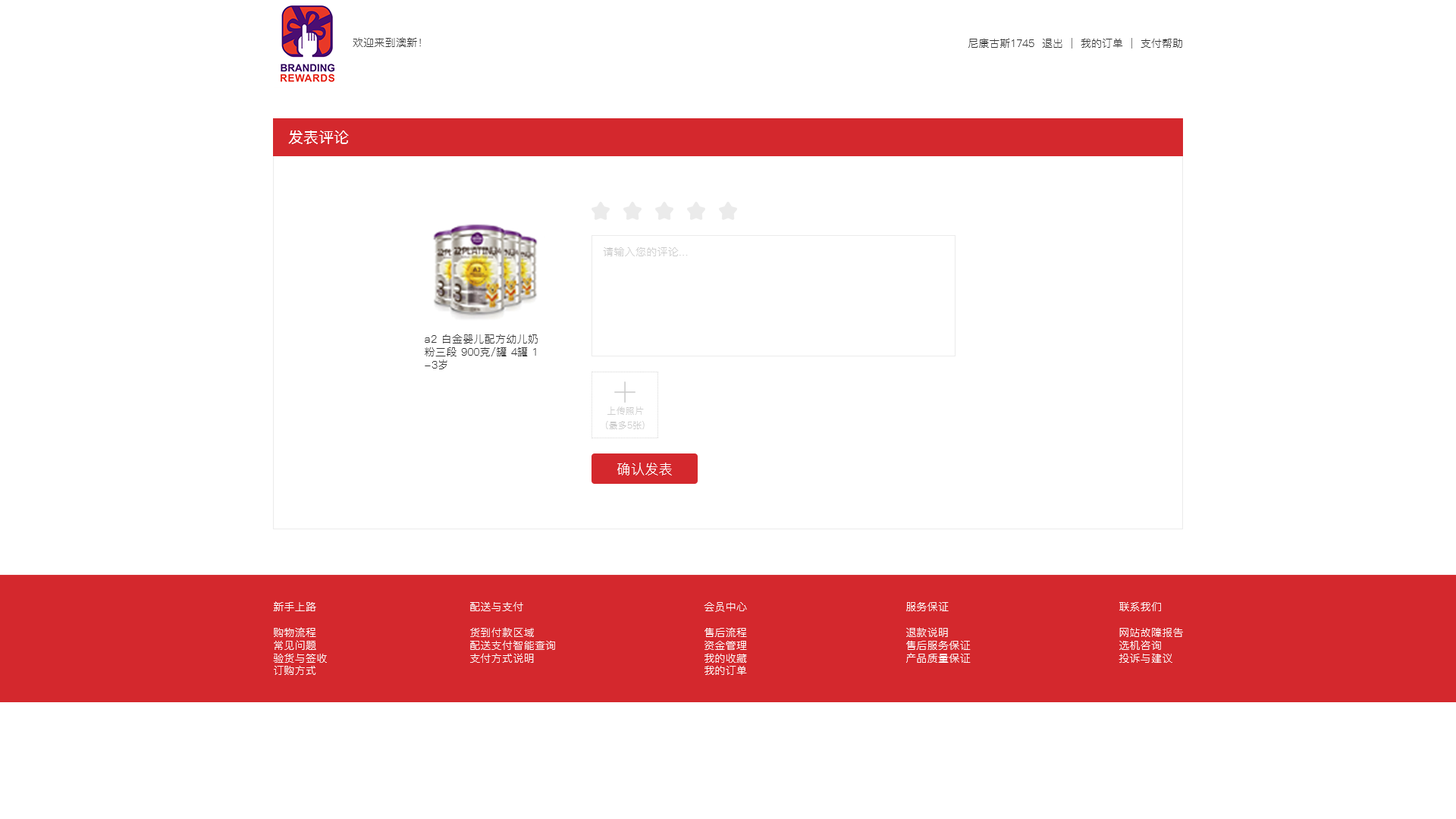
<style>
.page{position:relative;width:1456px;height:819px;background:#ffffff}
.page>*{position:absolute;margin:0}
.t1{font:10.6px "PingFang-SC-Regular";letter-spacing:0.02em;color:#333333}
.t2{font:10.6px "PingFang-SC-Regular";color:#333333}
.t3{font:15.2px "PingFang-SC-Medium";color:#ffffff}
.t4{font:10.6px "PingFang-SC-Regular";letter-spacing:0.02em;color:#cccccc}
.t5{font:9.1px "PingFang-SC-Regular";letter-spacing:0.02em;color:#cccccc}
.t6{font:13.6px "PingFang-SC-Regular";letter-spacing:0.02em;color:#ffffff}
.t7{font:10.6px "PingFang-SC-Regular";letter-spacing:0.02em;color:#fffefe}
</style>
<div class="page">
<p class="t1" style="left:353px;top:37px;width:68px;height:10px">欢迎来到澳新！</p>
<p class="t2" style="left:968px;top:38px;width:214px;height:11px">尼康古斯1745  退出  |  我的订单  |  支付帮助</p>
<p class="t3" style="left:288px;top:130px;width:61px;height:14px">发表评论</p>
<p class="t4" style="left:603px;top:247px;width:85px;height:9px">请输入您的评论...</p>
<p class="t1" style="left:425px;top:334px;width:113px;height:35px">a2 白金婴儿配方幼儿奶<br>粉三段 900克/罐 4罐 1<br>-3岁</p>
<p class="t5" style="left:607px;top:406px;width:37px;height:9px">上传照片</p>
<p class="t5" style="left:606px;top:421px;width:39px;height:8px">(最多5张)</p>
<p class="t6" style="left:617px;top:463px;width:55px;height:12px">确认发表</p>
<p class="t7" style="left:273px;top:601px;width:54px;height:74px">新手上路<br><br>购物流程<br>常见问题<br>验货与签收<br>订购方式</p>
<p class="t7" style="left:470px;top:601px;width:85px;height:62px">配送与支付<br><br>货到付款区域<br>配送支付智能查询<br>支付方式说明</p>
<p class="t7" style="left:704px;top:602px;width:43px;height:73px">会员中心<br><br>售后流程<br>资金管理<br>我的收藏<br>我的订单</p>
<p class="t7" style="left:906px;top:602px;width:65px;height:61px">服务保证<br><br>退款说明<br>售后服务保证<br>产品质量保证</p>
<p class="t7" style="left:1119px;top:602px;width:64px;height:61px">联系我们<br><br>网站故障报告<br>选机咨询<br>投诉与建议</p>
</div>
